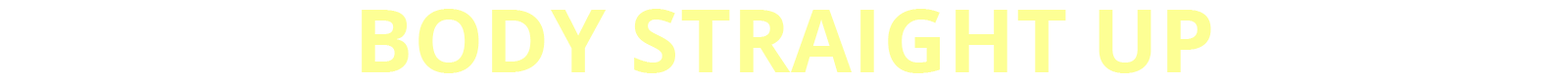
<style>
.page{position:relative;width:1568px;height:84px;background:#ffffff}
.page>*{position:absolute;margin:0}
.t1{font:88.2px "OpenSans-Bold";letter-spacing:0.01em;color:#fdff94;text-transform:uppercase}
</style>
<div class="page">
<p class="t1" style="left:362px;top:9px;width:849px;height:65px">body straight up</p>
</div>
